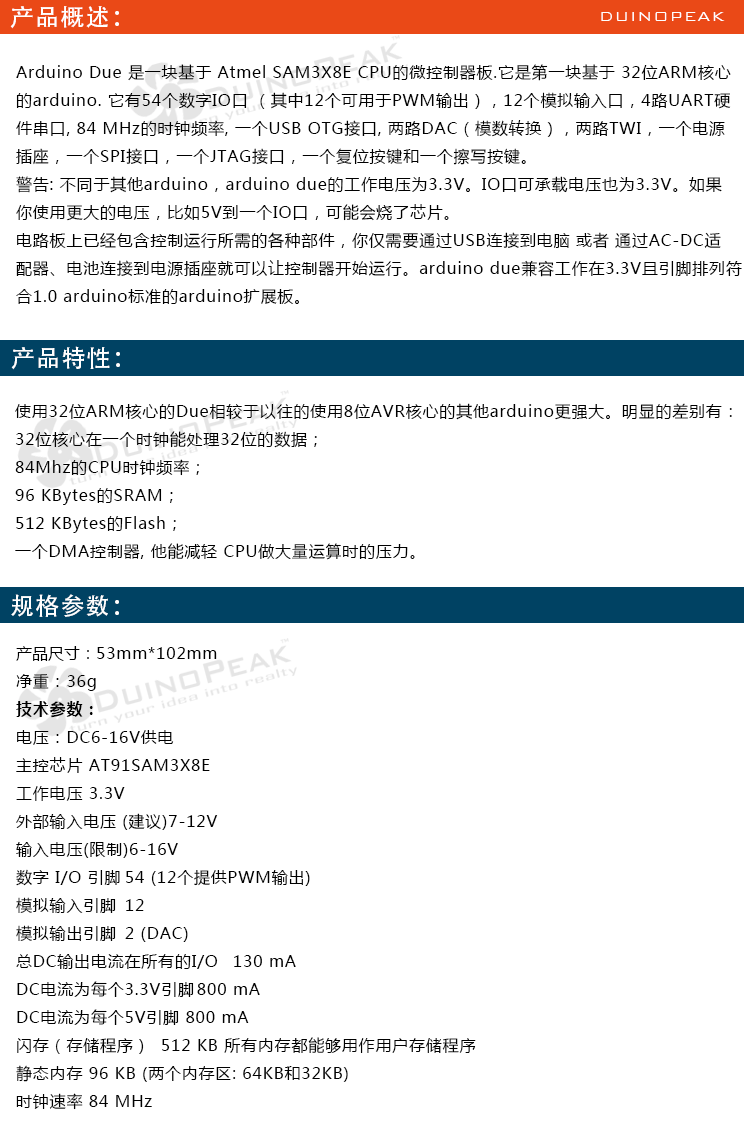
<style>
.page{position:relative;width:744px;height:1127px;background:#ffffff}
.page>*{position:absolute;margin:0}
.t1{font:24px "AdobeHeitiStd-Regular";letter-spacing:0.05em;color:#ffffff}
.t2{font:18px "BankGothicBT-Light";letter-spacing:0.05em;color:#ffffff}
.t3{font:16px "MicrosoftYaHei";letter-spacing:0.05em;color:#000000}
.t4{font:16px "MicrosoftYaHei";color:#000000}
.t5{font:16px "MicrosoftYaHei-Bold";letter-spacing:0.05em;color:#000000}
</style>
<div class="page">
<p class="t1" style="left:10px;top:6px;width:109px;height:23px">产品概述：</p>
<p class="t2" style="left:601px;top:12px;width:124px;height:9px">DUINOPEAK</p>
<p class="t3" style="left:16px;top:64px;width:726px;height:240px">Arduino Due 是一块基于 Atmel SAM3X8E CPU的微控制器板.它是第一块基于 32位ARM核心<br>的arduino. 它有54个数字IO口 （其中12个可用于PWM输出），12个模拟输入口，4路UART硬<br>件串口, 84 MHz的时钟频率, 一个USB OTG接口, 两路DAC（模数转换），两路TWI，一个电源<br>插座，一个SPI接口，一个JTAG接口，一个复位按键和一个擦写按键。<br>警告: 不同于其他arduino，arduino due的工作电压为3.3V。IO口可承载电压也为3.3V。如果<br>你使用更大的电压，比如5V到一个IO口，可能会烧了芯片。<br>电路板上已经包含控制运行所需的各种部件，你仅需要通过USB连接到电脑 或者 通过AC-DC适<br>配器、电池连接到电源插座就可以让控制器开始运行。arduino due兼容工作在3.3V且引脚排列符<br>合1.0 arduino标准的arduino扩展板。</p>
<p class="t1" style="left:11px;top:346px;width:109px;height:24px">产品特性：</p>
<p class="t3" style="left:15px;top:403px;width:717px;height:157px">使用32位ARM核心的Due相较于以往的使用8位AVR核心的其他arduino更强大。明显的差别有：<br>32位核心在一个时钟能处理32位的数据；<br>84Mhz的CPU时钟频率；<br>96 KBytes的SRAM；<br>512 KBytes的Flash；<br>一个DMA控制器, 他能减轻 CPU做大量运算时的压力。</p>
<p class="t1" style="left:11px;top:594px;width:108px;height:23px">规格参数：</p>
<p class="t3" style="left:16px;top:646px;width:460px;height:464px"><span class="t4">产品尺寸：</span>53mm*102mm<br>净重：36g<br><span class="t5">技术参数：<br></span>电压：DC6-16V供电<br>主控芯片 AT91SAM3X8E<br>工作电压 3.3V<br>外部输入电压 (建议)7-12V<br>输入电压(限制)6-16V<br>数字 I/O 引脚 54 (12个提供PWM输出)<br>模拟输入引脚 12<br>模拟输出引脚 2 (DAC)<br>总DC输出电流在所有的I/O 130 mA<br>DC电流为每个3.3V引脚 800 mA<br>DC电流为每个5V引脚 800 mA<br>闪存（存储程序） 512 KB 所有内存都能够用作用户存储程序<br>静态内存 96 KB (两个内存区: 64KB和32KB)<br>时钟速率 84 MHz</p>
</div>
